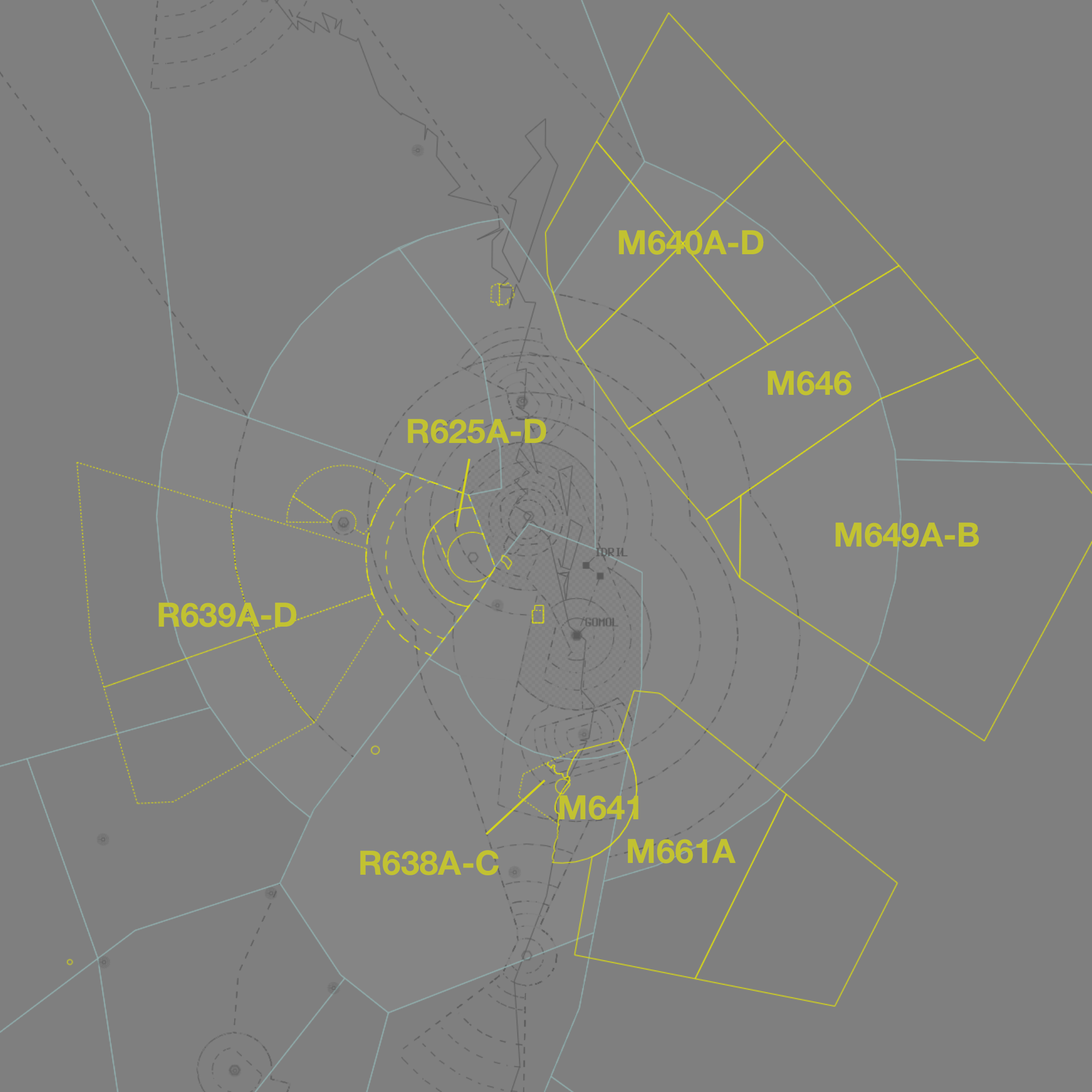
<style>
.page{position:relative;width:1092px;height:1092px;background:#7f7f7f}
.page>*{position:absolute;margin:0}
.t1{font:33.6px "HelveticaNeue-Bold";color:#c2c231}
</style>
<div class="page">
<p class="t1" style="left:619px;top:230px;width:145px;height:25px">M640A-D</p>
<p class="t1" style="left:768px;top:371px;width:84px;height:24px">M646</p>
<p class="t1" style="left:408px;top:419px;width:139px;height:25px">R625A-D</p>
<p class="t1" style="left:836px;top:522px;width:143px;height:25px">M649A-B</p>
<p class="t1" style="left:158px;top:603px;width:139px;height:24px">R639A-D</p>
<p class="t1" style="left:559px;top:795px;width:79px;height:25px">M641</p>
<p class="t1" style="left:628px;top:839px;width:108px;height:25px">M661A</p>
<p class="t1" style="left:360px;top:850px;width:139px;height:25px">R638A-C</p>
</div>
